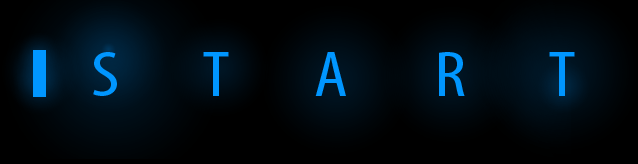
<style>
.page{position:relative;width:638px;height:164px;background:#000000}
.page>*{position:absolute;margin:0}
.t1{font:65.6px "MyriadPro-Cond";color:#0096ff;scale:1.18 1}
</style>
<div class="page">
<p class="t1" style="left:93px;top:52px;width:482px;height:44px">S       T       A       R       T</p>
</div>
